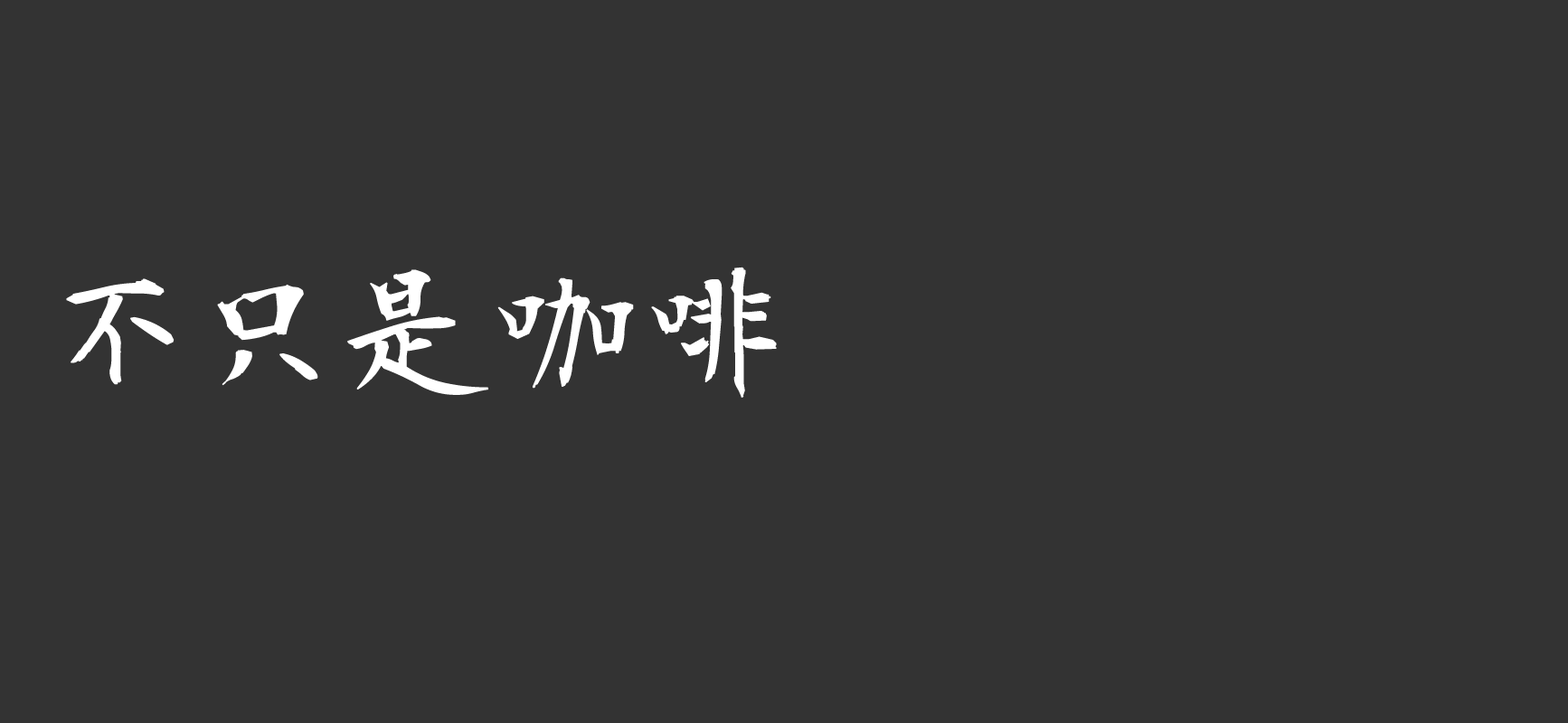
<style>
.page{position:relative;width:1568px;height:723px;background:#333333}
.page>*{position:absolute;margin:0}
.t1{font:156.7px "KouzanBrushFont";letter-spacing:-0.075em;color:#ffffff;font-weight:bold}
</style>
<div class="page">
<p class="t1" style="left:66px;top:267px;width:711px;height:131px">不只是咖啡</p>
</div>
